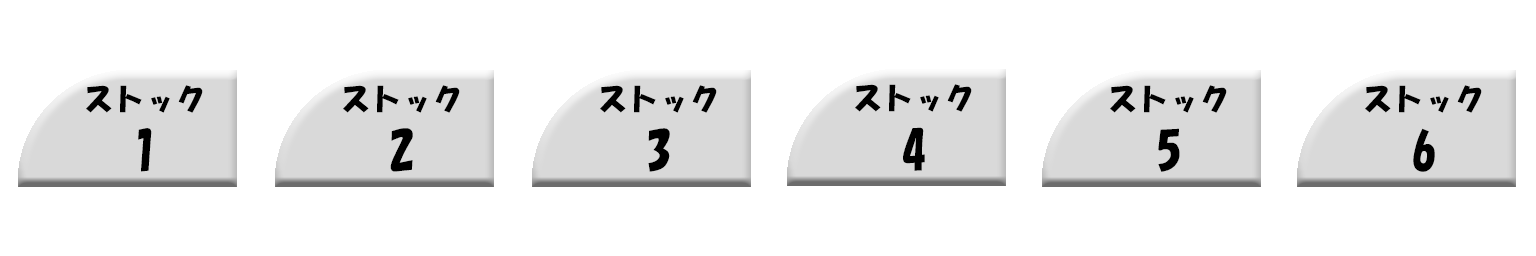
<style>
.page{position:relative;width:1536px;height:256px;background:#ffffff}
.page>*{position:absolute;margin:0}
.t1{font:30.9px "HGSoeiKakupoptai";color:#000000}
.t2{font:48px "HGSoeiKakupoptai";color:#000000}
</style>
<div class="page">
<p class="t1" style="left:86px;top:85px;width:117px;height:28px">ストック</p>
<p class="t1" style="left:343px;top:85px;width:117px;height:28px">ストック</p>
<p class="t1" style="left:600px;top:85px;width:117px;height:28px">ストック</p>
<p class="t1" style="left:855px;top:84px;width:117px;height:28px">ストック</p>
<p class="t1" style="left:1110px;top:85px;width:117px;height:28px">ストック</p>
<p class="t1" style="left:1365px;top:85px;width:117px;height:28px">ストック</p>
<p class="t2" style="left:138px;top:128px;width:14px;height:44px">1</p>
<p class="t2" style="left:390px;top:128px;width:23px;height:44px">2</p>
<p class="t2" style="left:648px;top:128px;width:22px;height:44px">3</p>
<p class="t2" style="left:903px;top:127px;width:22px;height:44px">4</p>
<p class="t2" style="left:1158px;top:128px;width:22px;height:44px">5</p>
<p class="t2" style="left:1413px;top:128px;width:22px;height:44px">6</p>
</div>
